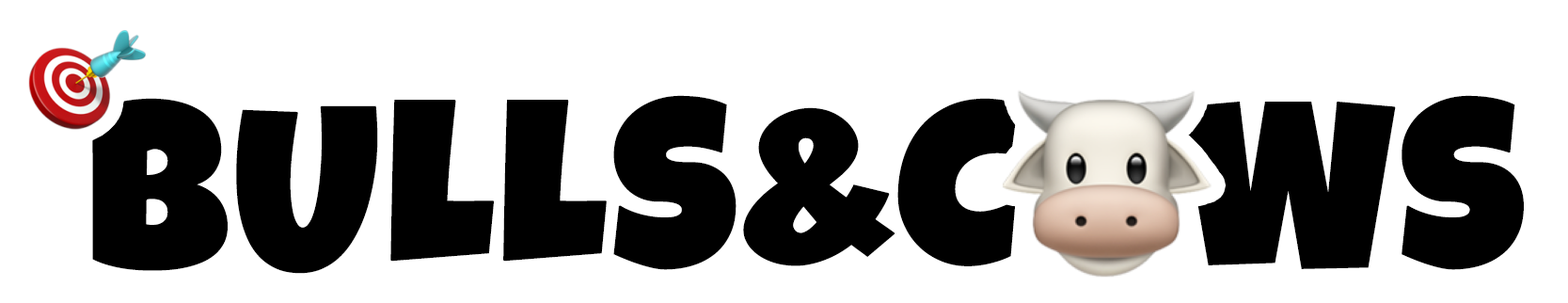
<style>
.page{position:relative;width:1568px;height:303px;background:#ffffff}
.page>*{position:absolute;margin:0}
.t1{font:235.2px "LuckiestGuy-Regular";color:#000000;font-weight:bold}
</style>
<div class="page">
<p class="t1" style="left:92px;top:95px;width:1432px;height:179px">BULLS&amp;C   WS</p>
</div>
